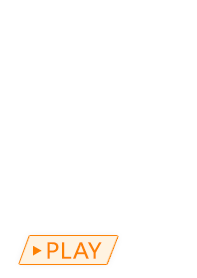
<style>
.page{position:relative;width:197px;height:278px;background:#ffffff}
.page>*{position:absolute;margin:0}
.t1{font:23.3px "SegoeUI";letter-spacing:0.02em;color:#fd8103;scale:1.07 1}
</style>
<div class="page">
<p class="t1" style="left:47px;top:242px;width:55px;height:17px">PLAY</p>
</div>
